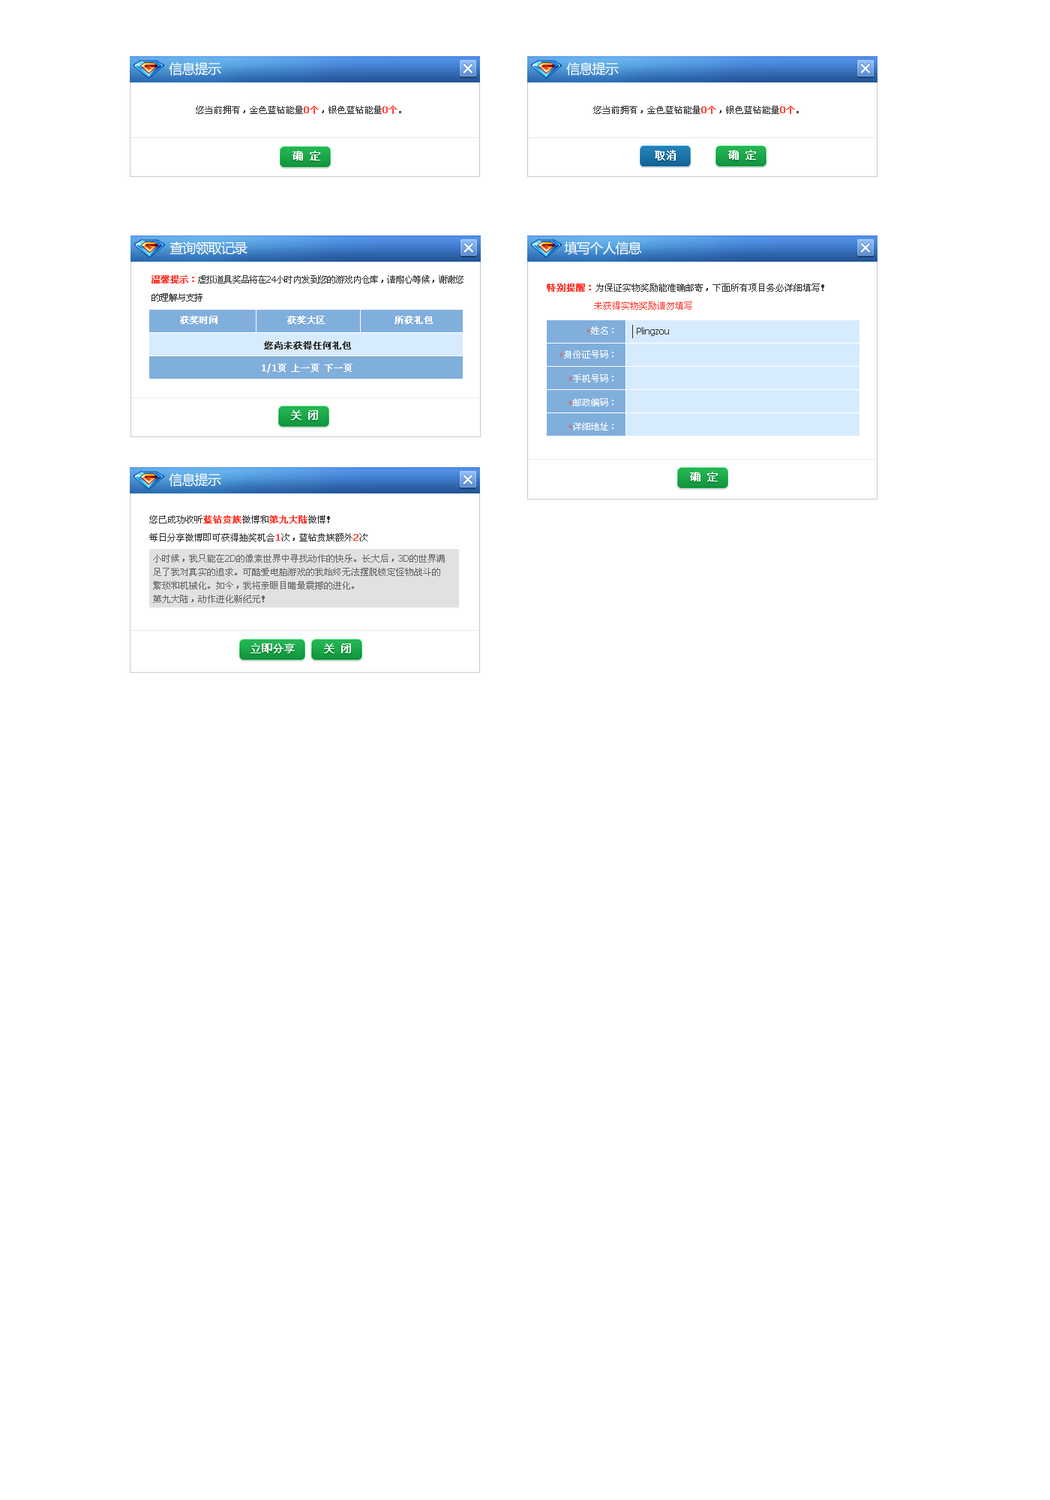
<style>
.page{position:relative;width:1050px;height:1500px;background:#ffffff}
.page>*{position:absolute;margin:0}
.t1{font:13.5px "MicrosoftYaHei";letter-spacing:-0.05em;color:#ffffff}
.t2{font:9px "SimSun";color:#333333}
.t3{font:9px "Tahoma";color:#ff4034;font-weight:bold}
.t4{font:9px "SimSun";color:#ff4034;font-weight:bold}
.t5{font:9px/18px "SimSun";letter-spacing:-0.05em;color:#333333}
.t6{font:9px/18px "SimSun";letter-spacing:-0.05em;color:#ff4034;font-weight:bold}
.t7{font:9px/18px "Tahoma";letter-spacing:-0.05em;color:#333333}
.t8{font:9px/18px "SimSun";color:#333333}
.t9{font:9px/18px "SimSun";color:#ff4034;font-weight:bold}
.t10{font:9px/18px "SimSun";color:#ff4034}
.t11{font:9px "SimSun";color:#fefefe;font-weight:bold}
.t12{font:9px/24px "SimSun";color:#ffffff}
.t13{font:9px/24px "SimSun";color:#cb6f68}
.t14{font:9px "Tahoma";color:#333333}
.t15{font:9px "SimSun";color:#333333;font-weight:bold}
.t16{font:9px "SimSun";color:#ffffff;font-weight:bold}
.t17{font:9px "Tahoma";color:#ffffff;font-weight:bold}
.t18{font:9px/18px "Tahoma";color:#ff4034;font-weight:bold}
.t19{font:9px/13.5px "SimSun";color:#666666}
.t20{font:9px/13.5px "Tahoma";color:#666666}
</style>
<div class="page">
<p class="t1" style="left:169px;top:62px;width:52px;height:14px">信息提示</p>
<p class="t1" style="left:566px;top:62px;width:53px;height:14px">信息提示</p>
<p class="t2" style="left:196px;top:106px;width:205px;height:8px">您当前拥有，金色蓝钻能量<span class="t3">0</span><span class="t4">个</span>，银色蓝钻能量<span class="t3">0</span><span class="t4">个</span>。</p>
<p class="t2" style="left:593px;top:106px;width:206px;height:8px">您当前拥有，金色蓝钻能量<span class="t3">0</span><span class="t4">个</span>，银色蓝钻能量<span class="t3">0</span><span class="t4">个</span>。</p>
<p class="t1" style="left:170px;top:242px;width:78px;height:13px">查询领取记录</p>
<p class="t1" style="left:564px;top:242px;width:78px;height:13px">填写个人信息</p>
<p class="t5" style="left:152px;top:275px;width:312px;height:27px"><span class="t6">温馨提示：</span>虚拟道具奖品将在<span class="t7">24</span>小时内发到您的游戏内仓库，请耐心等候，谢谢您<br>的理解与支持</p>
<p class="t8" style="left:547px;top:284px;width:277px;height:26px"><span class="t9">特别提醒：</span>为保证实物奖励能准确邮寄，下面所有项目务必详细填写！<br>         <span class="t10">未获得实物奖励请勿填写</span></p>
<p class="t11" style="left:180px;top:316px;width:253px;height:8px">获奖时间             获奖大区             所获礼包</p>
<p class="t12" style="left:560px;top:326px;width:54px;height:104px;text-align:right"><span class="t13">*</span>姓名：<br><span class="t13">*</span>身份证号码：<br><span class="t13">*</span>手机号码：<br><span class="t13">*</span>邮政编码：<br><span class="t13">*</span>详细地址：</p>
<p class="t14" style="left:637px;top:327px;width:32px;height:9px">Plingzou</p>
<p class="t15" style="left:264px;top:341px;width:87px;height:9px">您尚未获得任何礼包</p>
<p class="t16" style="left:262px;top:364px;width:90px;height:9px"><span class="t17">1/1</span>页 上一页 下一页</p>
<p class="t1" style="left:169px;top:473px;width:52px;height:14px">信息提示</p>
<p class="t8" style="left:149px;top:515px;width:219px;height:27px">您已成功收听<span class="t9">蓝钻贵族</span>微博和<span class="t9">第九大陆</span>微博！<br>每日分享微博即可获得抽奖机会<span class="t18">1</span>次，蓝钻贵族额外<span class="t18">2</span>次</p>
<p class="t19" style="left:153px;top:554px;width:292px;height:49px">小时候，我只能在<span class="t20">2D</span>的像素世界中寻找动作的快乐。长大后，<span class="t20">3D</span>的世界满<br>足了我对真实的追求。可酷爱电脑游戏的我始终无法摆脱锁定怪物战斗的<br>繁琐和机械化。如今，我将亲眼目睹最震撼的进化。<br>第九大陆，动作进化新纪元！</p>
</div>
